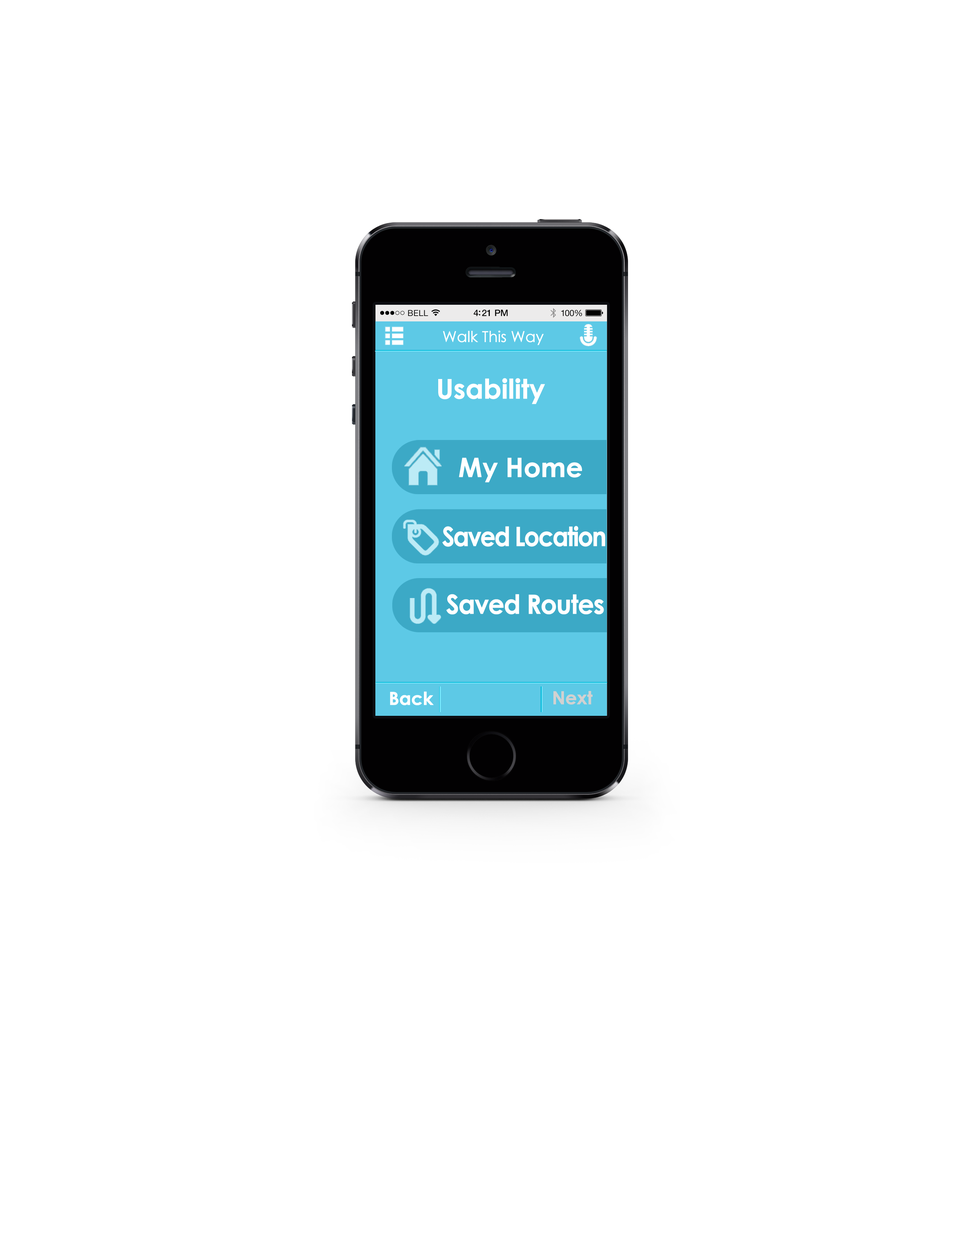
<style>
.page{position:relative;width:960px;height:1242px;background:#ffffff}
.page>*{position:absolute;margin:0}
.t1{font:15.1px "CenturyGothic";letter-spacing:-0.025em;color:#ffffff;font-weight:bold}
.t2{font:27.1px "CenturyGothic-Bold";letter-spacing:-0.025em;color:#ffffff;font-weight:bold}
.t3{font:26.7px "CenturyGothic-Bold";letter-spacing:-0.025em;color:#ffffff;font-weight:bold}
.t4{font:26.7px "CenturyGothic-Bold";letter-spacing:-0.075em;color:#ffffff;font-weight:bold;scale:0.9 1}
.t5{font:26.7px "CenturyGothic-Bold";letter-spacing:-0.05em;color:#ffffff;font-weight:bold;scale:0.95 1}
.t6{font:18.1px "CenturyGothic-Bold";letter-spacing:-0.025em;color:#ffffff;font-weight:bold}
.t7{font:18.1px "CenturyGothic-Bold";letter-spacing:-0.025em;color:#d1d1d1;font-weight:bold}
</style>
<div class="page">
<p class="t1" style="left:443px;top:331px;width:101px;height:14px">Walk This Way</p>
<p class="t2" style="left:438px;top:378px;width:107px;height:26px">Usability</p>
<p class="t3" style="left:459px;top:458px;width:123px;height:25px">My Home</p>
<p class="t4" style="left:442px;top:526px;width:163px;height:21px">Saved Location</p>
<p class="t5" style="left:446px;top:594px;width:158px;height:21px">Saved Routes</p>
<p class="t6" style="left:390px;top:692px;width:44px;height:13px">Back</p>
<p class="t7" style="left:553px;top:691px;width:40px;height:14px">Next</p>
</div>
